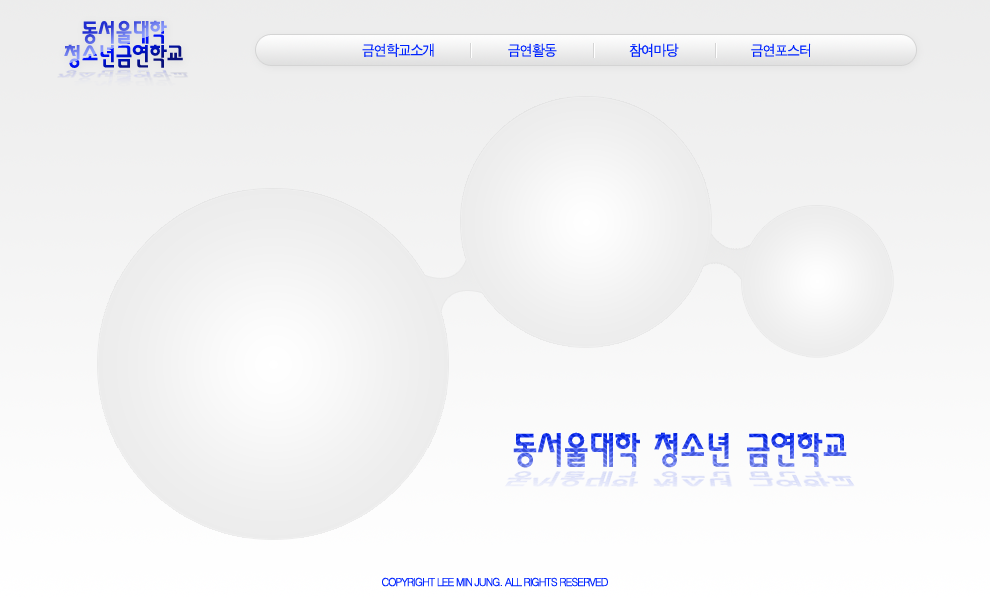
<style>
.page{position:relative;width:990px;height:600px}
.page>*{position:absolute;margin:0}
.t1{font:24px/24px "Seoul-City";letter-spacing:-0.1em}
.t2{font:15px "DotumChe";letter-spacing:-0.1em;color:#0024ff;scale:0.9 1}
.t3{font:11px "Dotum";letter-spacing:-0.1em;color:#0024ff}
</style>
<div class="page">
<p class="t1" style="left:64px;top:20px;width:119px;height:48px;text-align:center">동서울대학<br>청소년금연학교</p>
<p class="t2" style="left:362px;top:43px;width:449px;height:14px">금연학교소개　　　　　　금연활동　　　　　　참여마당　　　　　　금연포스터</p>
<p class="t3" style="left:382px;top:577px;width:226px;height:10px">COPYRIGHT LEE MIN JUNG. ALL RIGHTS RESERVED</p>
</div>
